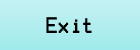
<style>
.page{position:relative;width:140px;height:50px}
.page>*{position:absolute;margin:0}
.t1{font:18px "Terminal";color:#000000;scale:0.91 1}
</style>
<div class="page">
<p class="t1" style="left:46px;top:17px;width:46px;height:16px">Exit</p>
</div>
